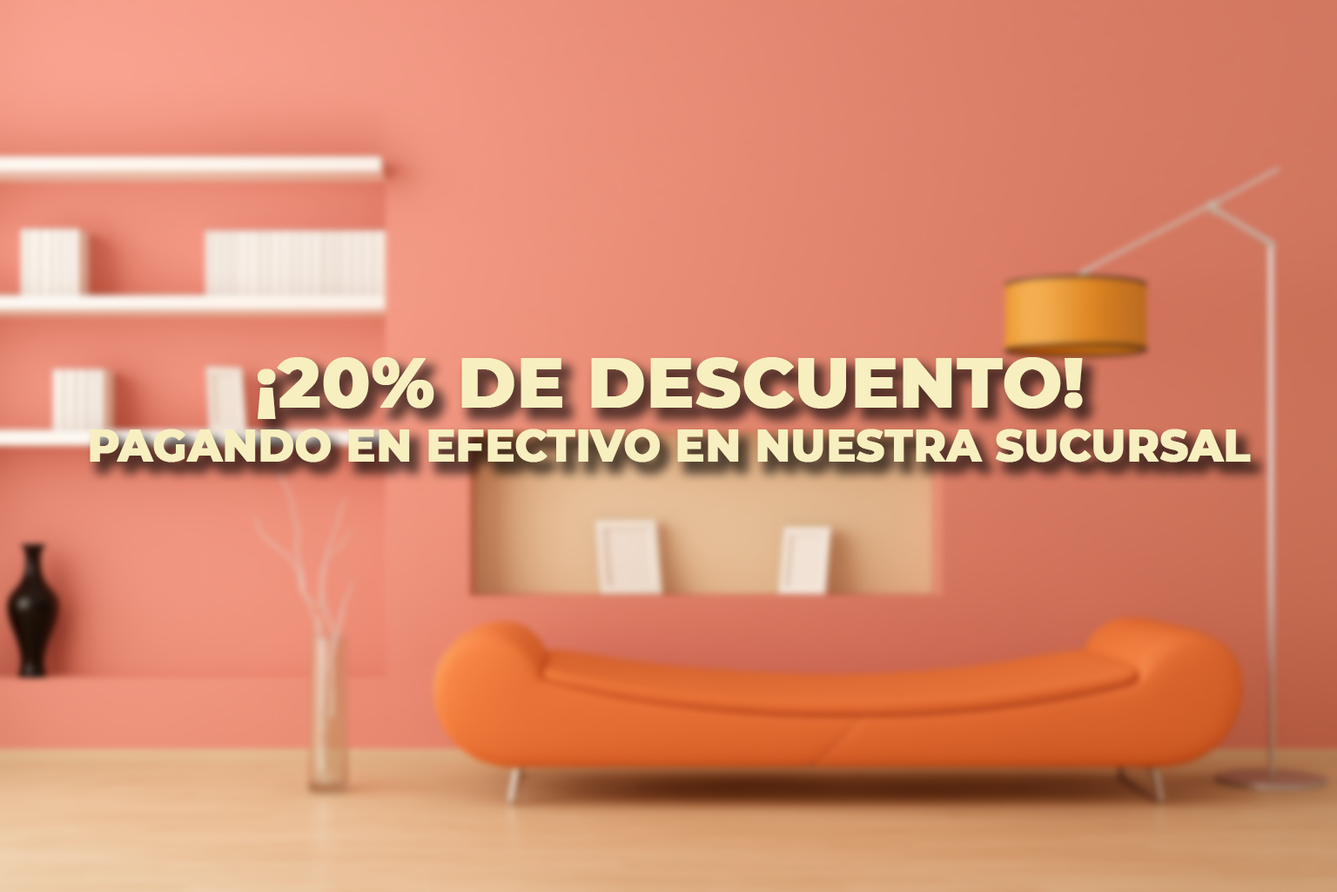
<style>
.page{position:relative;width:1337px;height:892px}
.page>*{position:absolute;margin:0}
.t1{font:69.5px "Montserrat-ExtraBold";color:#f8efc0;font-weight:bold}
.t2{font:43.1px "Montserrat-ExtraBold";color:#f8efc0;font-weight:bold}
</style>
<div class="page">
<p class="t1" style="left:258px;top:357px;width:825px;height:62px">¡20% DE DESCUENTO!</p>
<p class="t2" style="left:90px;top:428px;width:1161px;height:34px">PAGANDO EN EFECTIVO EN NUESTRA SUCURSAL</p>
</div>
